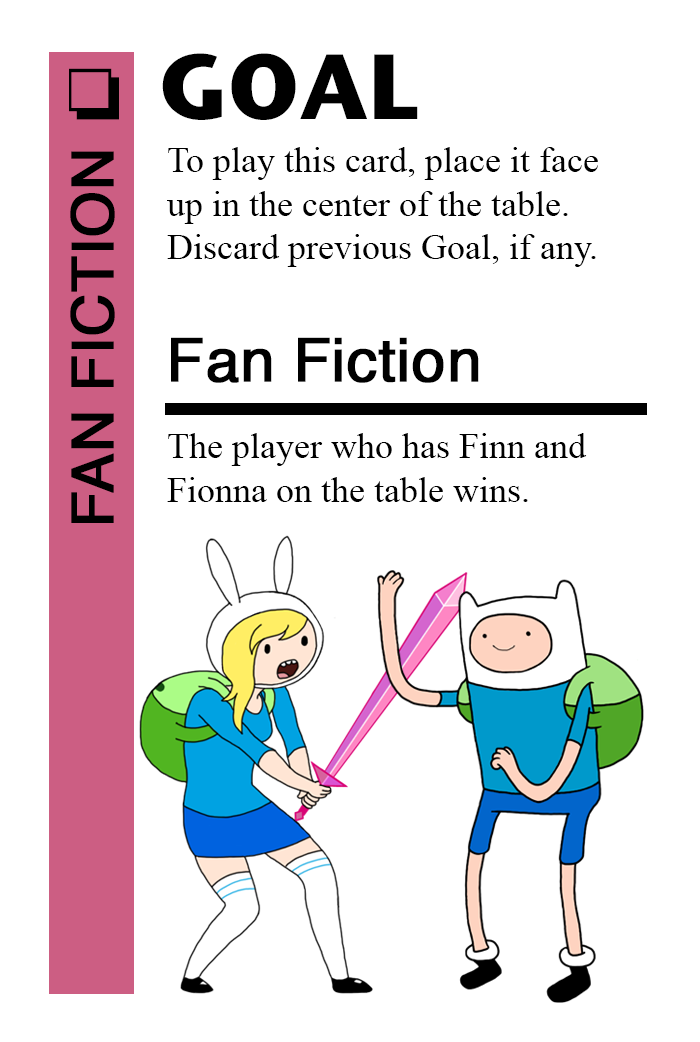
<style>
.page{position:relative;width:700px;height:1042px;background:#ffffff}
.page>*{position:absolute;margin:0}
.t1{font:92px "StoneSansITC-Bold";color:#000000}
.t2{font:72px "MS-Gothic";color:#000000}
.t3{font:36px "TimesNewRomanPSMT";color:#000000}
.t4{font:58px "Helvetica";color:#000000;font-weight:bold}
.t5{font:60px "Helvetica";color:#000000;font-weight:bold}
</style>
<div class="page">
<p class="t1" style="left:162px;top:53px;width:256px;height:67px">GOAL</p>
<p class="t2" style="left:69px;top:68px;width:50px;height:52px">❏</p>
<p class="t3" style="left:167px;top:147px;width:431px;height:120px">To play this card, place it face<br>up in the center of the table.<br>Discard previous Goal, if any.</p>
<p class="t4" style="left:70px;top:151px;width:45px;height:372px;rotate:-90deg">FAN FICTION</p>
<p class="t5" style="left:171px;top:337px;width:308px;height:46px">Fan Fiction</p>
<p class="t3" style="left:167px;top:433px;width:420px;height:69px">The player who has Finn and <br>Fionna on the table wins.</p>
</div>
